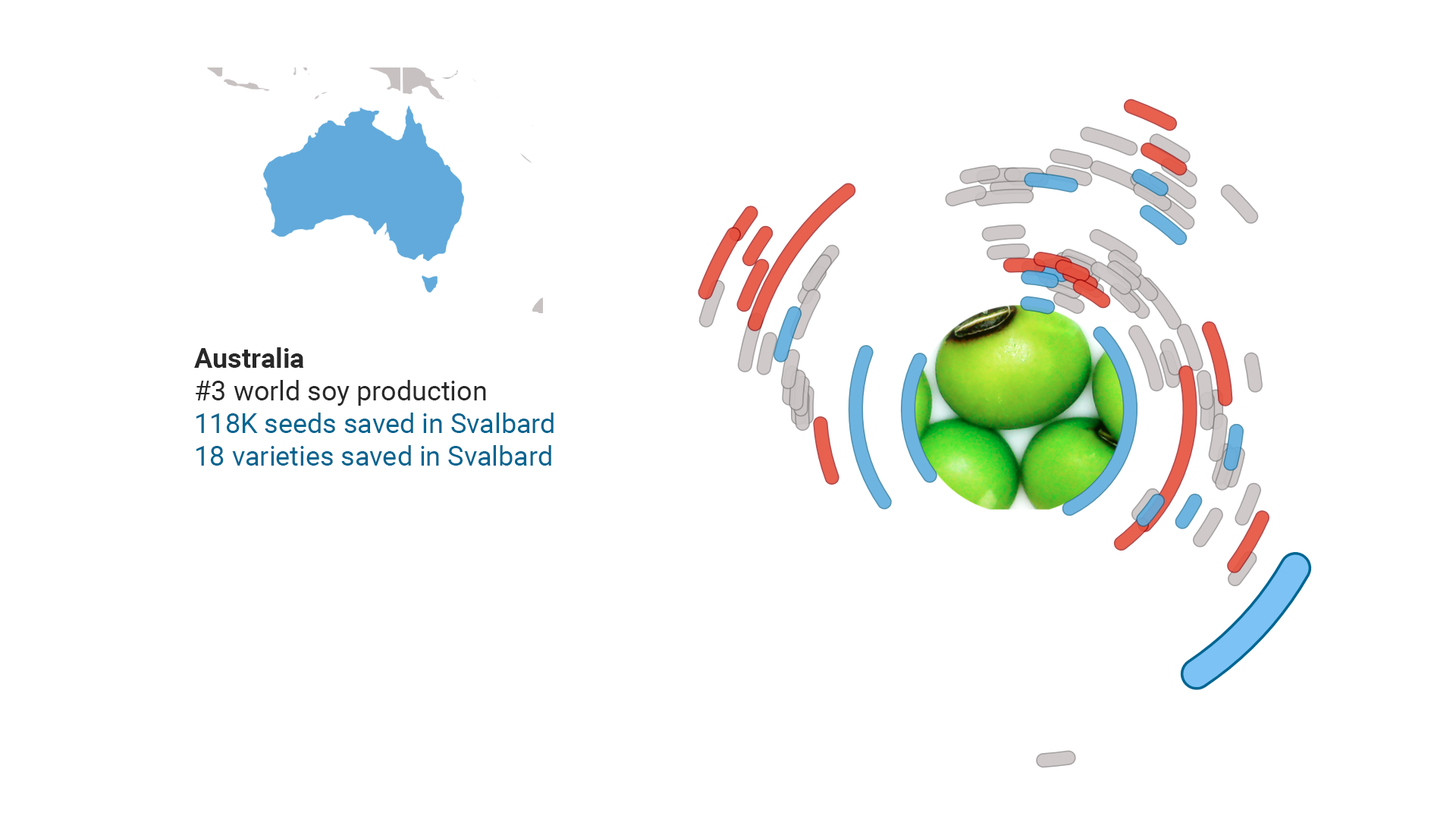
<style>
.page{position:relative;width:1456px;height:819px;background:#ffffff}
.page>*{position:absolute;margin:0}
.t1{font:27.3px "Roboto-Regular";color:#006591}
.t2{font:27.3px "Roboto-Bold";color:#282828}
.t3{font:27.3px "Roboto-Regular";color:#282828}
</style>
<div class="page">
<p class="t1" style="left:194px;top:347px;width:360px;height:119px"><span class="t2">Australia<br></span><span class="t3">#3 world soy production<br></span>118K seeds saved in Svalbard<br>18 varieties saved in Svalbard</p>
</div>
